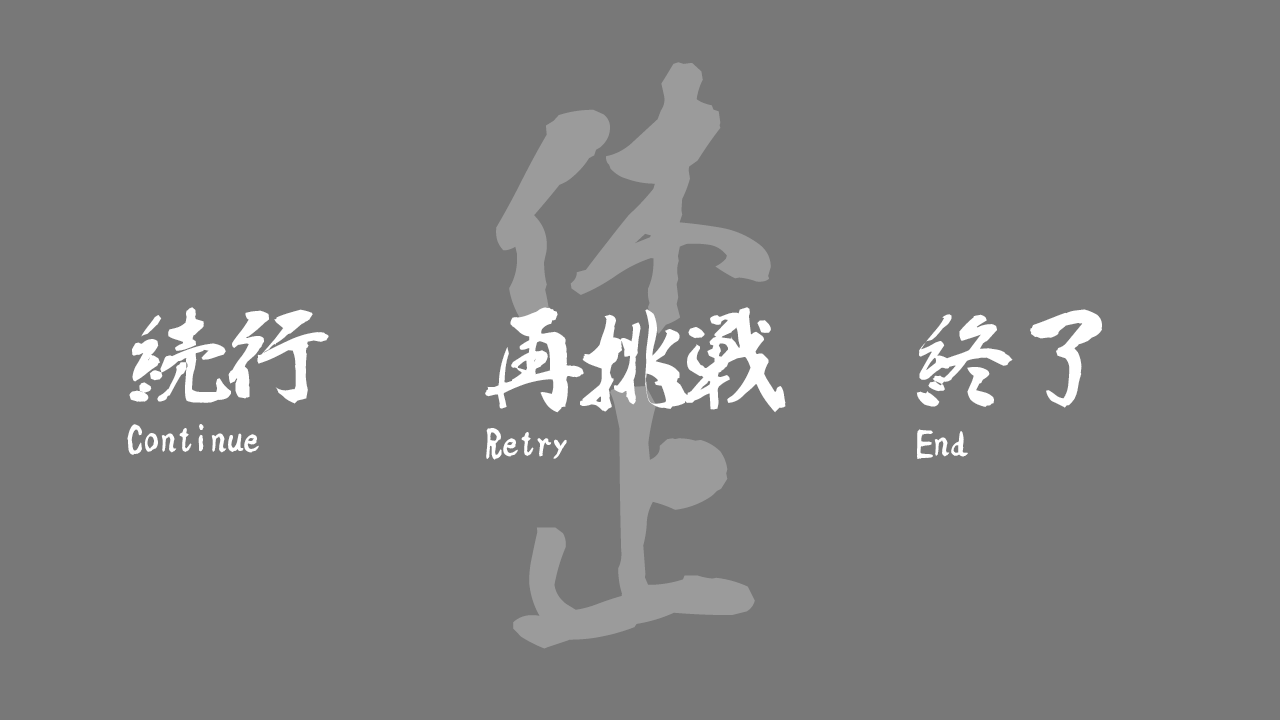
<style>
.page{position:relative;width:1280px;height:720px;background:#787878}
.page>*{position:absolute;margin:0}
.t1{font:100px "AB_ootori";color:#ffffff}
.t2{font:33.3px "AB_ootori";color:#ffffff}
</style>
<div class="page">
<p class="t1" style="left:129px;top:307px;width:200px;height:97px">続行</p>
<p class="t1" style="left:485px;top:307px;width:301px;height:106px">再挑戦</p>
<p class="t1" style="left:916px;top:309px;width:186px;height:99px">終了</p>
<p class="t2" style="left:127px;top:424px;width:132px;height:31px">Continue</p>
<p class="t2" style="left:486px;top:428px;width:81px;height:32px">Retry</p>
<p class="t2" style="left:917px;top:429px;width:51px;height:30px">End</p>
</div>
